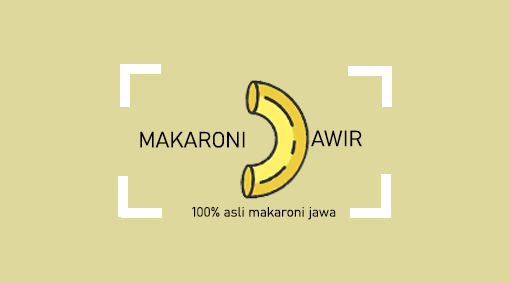
<style>
.page{position:relative;width:510px;height:283px;background:#ded89d}
.page>*{position:absolute;margin:0}
.t1{font:21.8px "Bahnschrift-Light";color:#000000}
.t2{font:13.3px "Bahnschrift-Light";color:#000000}
</style>
<div class="page">
<p class="t1" style="left:140px;top:131px;width:105px;height:17px">MAKARONI</p>
<p class="t1" style="left:311px;top:130px;width:51px;height:17px">AWIR</p>
<p class="t2" style="left:192px;top:207px;width:144px;height:13px">100% asli makaroni jawa</p>
</div>
